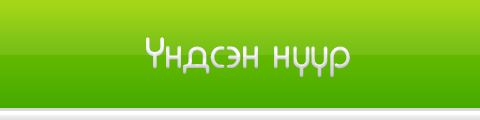
<style>
.page{position:relative;width:480px;height:120px}
.page>*{position:absolute;margin:0}
.t1{font:41.3px "MonHeide";color:#e4e4e4;scale:0.92 1}
</style>
<div class="page">
<p class="t1" style="left:146px;top:37px;width:204px;height:41px">Үндсэн нүүр</p>
</div>
